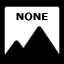
<style>
.page{position:relative;width:64px;height:64px;background:#000000}
.page>*{position:absolute;margin:0}
.t1{font:10px "Verdana-Bold";color:#000000}
</style>
<div class="page">
<p class="t1" style="left:16px;top:12px;width:32px;height:9px">NONE</p>
</div>
